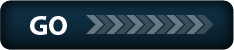
<style>
.page{position:relative;width:234px;height:50px}
.page>*{position:absolute;margin:0}
.t1{font:28px "MyriadPro-Bold";color:#ffffff}
</style>
<div class="page">
<p class="t1" style="left:30px;top:16px;width:37px;height:19px">GO</p>
<p class="t1" style="left:30px;top:16px;width:37px;height:19px">GO</p>
</div>
